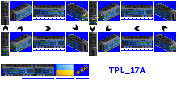
<style>
.page{position:relative;width:179px;height:90px;background:#ffffff}
.page>*{position:absolute;margin:0}
.t1{font:8px "Museo700-Regular";letter-spacing:0.075em;color:#0000ff;text-transform:uppercase}
</style>
<div class="page">
<p class="t1" style="left:108px;top:67px;width:38px;height:7px">tpl_17a</p>
</div>
